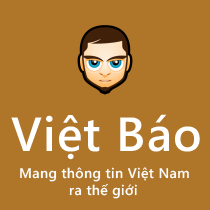
<style>
.page{position:relative;width:210px;height:210px;background:#af7529}
.page>*{position:absolute;margin:0}
.t1{font:48px "SegoeWP-Semibold";letter-spacing:0.025em;color:#ffffff}
.t2{font:14px "SegoeWP-Semibold";letter-spacing:0.025em;color:#fefefe}
.t3{font:14px "SegoeWP-Semibold";letter-spacing:0.025em;color:#ffffff}
</style>
<div class="page">
<p class="t1" style="left:11px;top:114px;width:189px;height:46px">Việt Báo</p>
<p class="t2" style="left:20px;top:167px;width:169px;height:15px">Mang thông tin Việt Nam</p>
<p class="t3" style="left:69px;top:183px;width:68px;height:16px">ra thế giới</p>
</div>
